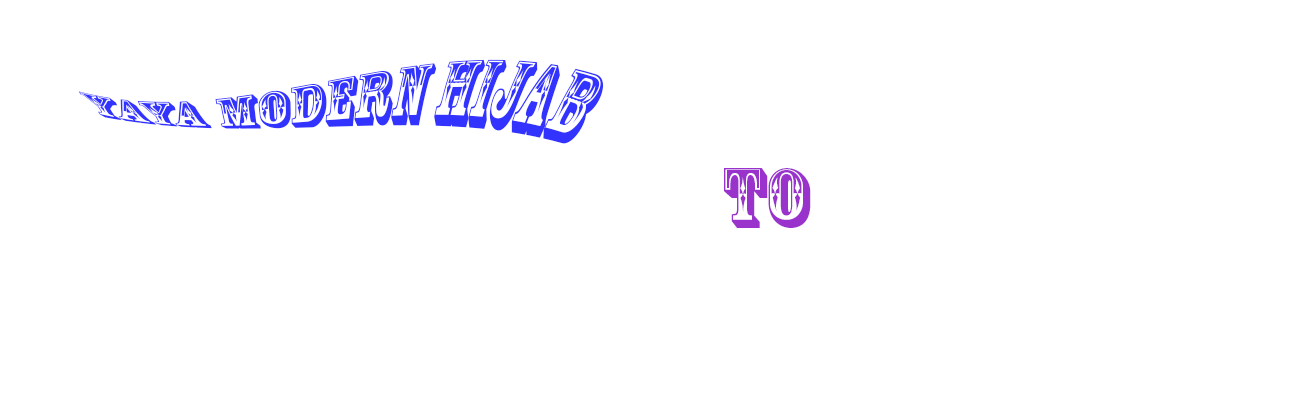
<style>
.page{position:relative;width:1300px;height:400px;background:#ffffff}
.page>*{position:absolute;margin:0}
.t1{font:60px "RosewoodStd-Regular";color:#3333ff}
.t2{font:48px "THFahkwang";color:#cc0000}
.t3{font:80px "RosewoodStd-Regular";color:#9933cc}
</style>
<div class="page">
<p class="t1" style="left:78px;top:59px;width:526px;height:85px"><span class="t2"> <br><br></span>yaya modern hijab</p>
<p class="t3" style="left:724px;top:168px;width:87px;height:60px">to</p>
</div>
